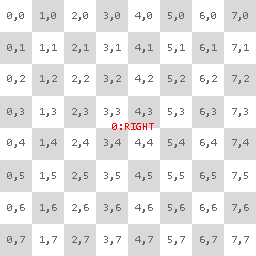
<style>
.page{position:relative;width:256px;height:256px;background:#ffffff}
.page>*{position:absolute;margin:0}
.t1{font:11px "Consolas";color:#666666}
.t2{font:11px "Consolas";color:#ff0000}
</style>
<div class="page">
<p class="t1" style="left:7px;top:12px;width:17px;height:9px">0,0</p>
<p class="t1" style="left:40px;top:12px;width:16px;height:9px">1,0</p>
<p class="t1" style="left:72px;top:12px;width:16px;height:9px">2,0</p>
<p class="t1" style="left:104px;top:12px;width:16px;height:9px">3,0</p>
<p class="t1" style="left:135px;top:12px;width:17px;height:9px">4,0</p>
<p class="t1" style="left:168px;top:12px;width:16px;height:9px">5,0</p>
<p class="t1" style="left:200px;top:12px;width:16px;height:9px">6,0</p>
<p class="t1" style="left:232px;top:12px;width:16px;height:9px">7,0</p>
<p class="t1" style="left:7px;top:44px;width:18px;height:9px">0,1</p>
<p class="t1" style="left:40px;top:44px;width:17px;height:9px">1,1</p>
<p class="t1" style="left:72px;top:44px;width:17px;height:9px">2,1</p>
<p class="t1" style="left:104px;top:44px;width:17px;height:9px">3,1</p>
<p class="t1" style="left:135px;top:44px;width:18px;height:9px">4,1</p>
<p class="t1" style="left:168px;top:44px;width:17px;height:9px">5,1</p>
<p class="t1" style="left:200px;top:44px;width:17px;height:9px">6,1</p>
<p class="t1" style="left:232px;top:44px;width:17px;height:9px">7,1</p>
<p class="t1" style="left:7px;top:75px;width:18px;height:9px">0,2</p>
<p class="t1" style="left:40px;top:75px;width:17px;height:9px">1,2</p>
<p class="t1" style="left:72px;top:75px;width:17px;height:9px">2,2</p>
<p class="t1" style="left:104px;top:75px;width:17px;height:9px">3,2</p>
<p class="t1" style="left:135px;top:75px;width:18px;height:9px">4,2</p>
<p class="t1" style="left:168px;top:75px;width:17px;height:9px">5,2</p>
<p class="t1" style="left:200px;top:75px;width:17px;height:9px">6,2</p>
<p class="t1" style="left:232px;top:75px;width:17px;height:9px">7,2</p>
<p class="t1" style="left:7px;top:108px;width:17px;height:9px">0,3</p>
<p class="t1" style="left:40px;top:108px;width:16px;height:9px">1,3</p>
<p class="t1" style="left:72px;top:108px;width:16px;height:9px">2,3</p>
<p class="t1" style="left:104px;top:108px;width:16px;height:9px">3,3</p>
<p class="t1" style="left:135px;top:108px;width:17px;height:9px">4,3</p>
<p class="t1" style="left:168px;top:108px;width:16px;height:9px">5,3</p>
<p class="t1" style="left:200px;top:108px;width:16px;height:9px">6,3</p>
<p class="t1" style="left:232px;top:108px;width:16px;height:9px">7,3</p>
<p class="t2" style="left:112px;top:123px;width:42px;height:7px">0:RIGHT</p>
<p class="t1" style="left:7px;top:139px;width:18px;height:9px">0,4</p>
<p class="t1" style="left:40px;top:139px;width:17px;height:9px">1,4</p>
<p class="t1" style="left:72px;top:139px;width:17px;height:9px">2,4</p>
<p class="t1" style="left:104px;top:139px;width:17px;height:9px">3,4</p>
<p class="t1" style="left:135px;top:139px;width:18px;height:9px">4,4</p>
<p class="t1" style="left:168px;top:139px;width:17px;height:9px">5,4</p>
<p class="t1" style="left:200px;top:139px;width:17px;height:9px">6,4</p>
<p class="t1" style="left:232px;top:139px;width:17px;height:9px">7,4</p>
<p class="t1" style="left:7px;top:172px;width:17px;height:9px">0,5</p>
<p class="t1" style="left:40px;top:172px;width:16px;height:9px">1,5</p>
<p class="t1" style="left:72px;top:172px;width:16px;height:9px">2,5</p>
<p class="t1" style="left:104px;top:172px;width:16px;height:9px">3,5</p>
<p class="t1" style="left:135px;top:172px;width:17px;height:9px">4,5</p>
<p class="t1" style="left:168px;top:172px;width:16px;height:9px">5,5</p>
<p class="t1" style="left:200px;top:172px;width:16px;height:9px">6,5</p>
<p class="t1" style="left:232px;top:172px;width:16px;height:9px">7,5</p>
<p class="t1" style="left:7px;top:204px;width:18px;height:9px">0,6</p>
<p class="t1" style="left:40px;top:204px;width:17px;height:9px">1,6</p>
<p class="t1" style="left:72px;top:204px;width:17px;height:9px">2,6</p>
<p class="t1" style="left:104px;top:204px;width:17px;height:9px">3,6</p>
<p class="t1" style="left:135px;top:204px;width:18px;height:9px">4,6</p>
<p class="t1" style="left:168px;top:204px;width:17px;height:9px">5,6</p>
<p class="t1" style="left:200px;top:204px;width:17px;height:9px">6,6</p>
<p class="t1" style="left:232px;top:204px;width:17px;height:9px">7,6</p>
<p class="t1" style="left:7px;top:236px;width:18px;height:9px">0,7</p>
<p class="t1" style="left:40px;top:236px;width:17px;height:9px">1,7</p>
<p class="t1" style="left:72px;top:236px;width:17px;height:9px">2,7</p>
<p class="t1" style="left:104px;top:236px;width:17px;height:9px">3,7</p>
<p class="t1" style="left:135px;top:236px;width:18px;height:9px">4,7</p>
<p class="t1" style="left:168px;top:236px;width:17px;height:9px">5,7</p>
<p class="t1" style="left:200px;top:236px;width:17px;height:9px">6,7</p>
<p class="t1" style="left:232px;top:236px;width:17px;height:9px">7,7</p>
</div>
